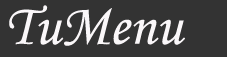
<style>
.page{position:relative;width:227px;height:57px;background:#333333}
.page>*{position:absolute;margin:0}
.t1{font:58px "MonotypeCorsiva";color:#faf7f9}
</style>
<div class="page">
<p class="t1" style="left:9px;top:5px;width:176px;height:41px">TuMenu</p>
</div>
